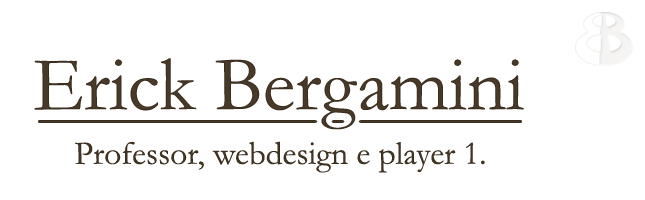
<style>
.page{position:relative;width:645px;height:200px;background:#ffffff}
.page>*{position:absolute;margin:0}
.t1{font:77.8px "Garamond";color:#483928}
.t2{font:33.3px "Garamond";color:#483928}
</style>
<div class="page">
<p class="t1" style="left:34px;top:58px;width:490px;height:72px">Erick Bergamini</p>
<p class="t2" style="left:74px;top:141px;width:411px;height:32px">Professor, webdesign e player 1.</p>
</div>
